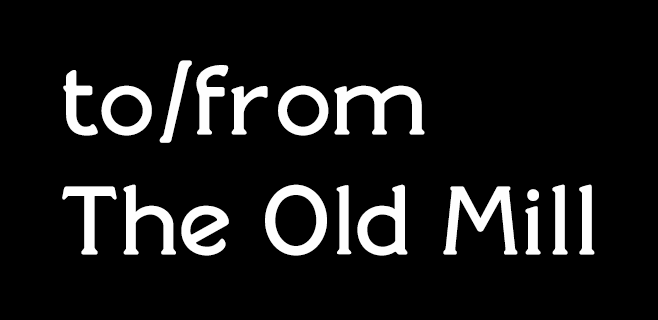
<style>
.page{position:relative;width:658px;height:320px;background:#000000}
.page>*{position:absolute;margin:0}
.t1{font:100px "SilentinaFilm";color:#fefefe;font-weight:bold}
</style>
<div class="page">
<p class="t1" style="left:62px;top:60px;width:533px;height:196px">to/from<br>The Old Mill</p>
</div>
